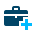
<style>
.page{position:relative;width:32px;height:32px;background:#ffffff}
.page>*{position:absolute;margin:0}
.t1{font:24px "Montserrat-Bold";letter-spacing:0.04em;color:#00bbff}
</style>
<div class="page">
<p class="t1" style="left:21px;top:19px;width:11px;height:11px">+</p>
</div>
